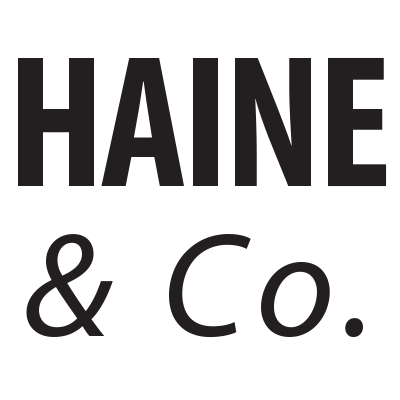
<style>
.page{position:relative;width:400px;height:400px;background:#ffffff}
.page>*{position:absolute;margin:0}
.t1{font:190px/150px "MyriadPro-BoldCond";color:#231f20}
.t2{font:150px/150px "MyriadPro-It";letter-spacing:0.075em;color:#231f20}
</style>
<div class="page">
<p class="t1" style="left:18px;top:57px;width:369px;height:281px;text-align:center">HAINE<br><span class="t2">&amp; Co.</span></p>
</div>
